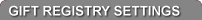
<style>
.page{position:relative;width:202px;height:20px;background:#858585}
.page>*{position:absolute;margin:0}
.t1{font:13.3px "Arial-BoldMT";color:#ffffff}
</style>
<div class="page">
<p class="t1" style="left:9px;top:5px;width:171px;height:11px">GIFT REGISTRY SETTINGS</p>
</div>
